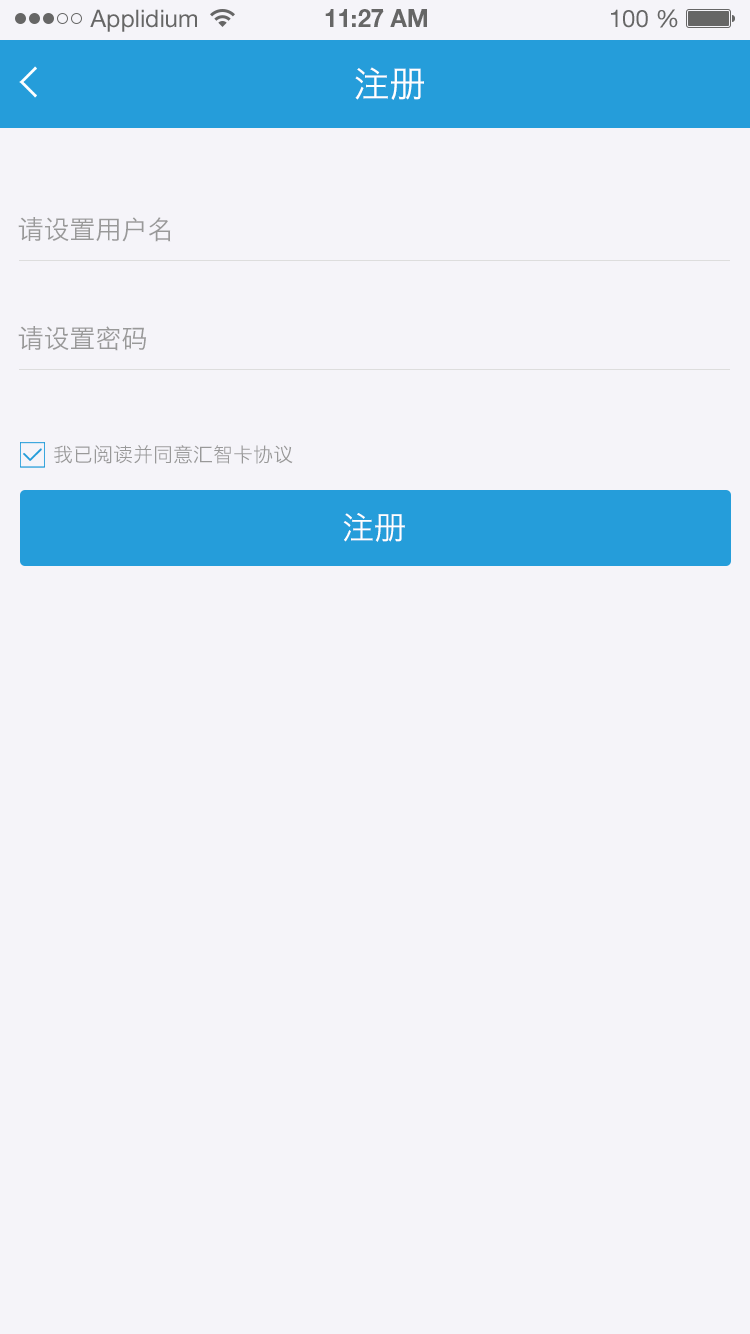
<style>
.page{position:relative;width:750px;height:1334px;background:#f5f4f9}
.page>*{position:absolute;margin:0}
.t1{font:24px "HelveticaNeueLTStd-Roman";color:#666666}
.t2{font:24px "HelveticaNeueLTStd-Bd";color:#666666}
.t3{font:36px "HiraginoSansGB-W3";color:#ffffff;text-transform:uppercase}
.t4{font:26px "HiraginoSansGB-W3";color:#999999;text-transform:uppercase}
.t5{font:20px "HiraginoSansGB-W3";color:#999999;text-transform:uppercase}
.t6{font:32px "HiraginoSansGB-W3";color:#ffffff;text-transform:uppercase}
</style>
<div class="page">
<p class="t1" style="left:90px;top:9px;width:107px;height:23px">Applidium</p>
<p class="t2" style="left:325px;top:9px;width:102px;height:18px">11:27 AM</p>
<p class="t1" style="left:611px;top:9px;width:67px;height:19px">100 %</p>
<p class="t3" style="left:355px;top:67px;width:69px;height:33px">注册</p>
<p class="t4" style="left:18px;top:217px;width:153px;height:25px">请设置用户名</p>
<p class="t4" style="left:18px;top:326px;width:128px;height:25px">请设置密码</p>
<p class="t5" style="left:54px;top:445px;width:239px;height:19px">我已阅读并同意汇智卡协议</p>
<p class="t6" style="left:343px;top:513px;width:62px;height:29px">注册</p>
</div>
